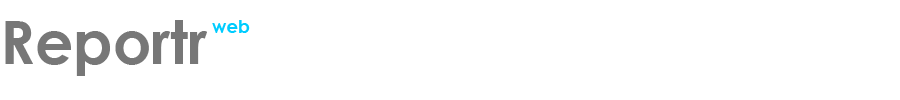
<style>
.page{position:relative;width:900px;height:100px;background:#ffffff}
.page>*{position:absolute;margin:0}
.t1{font:60px "CenturyGothic-Bold";color:#777777}
.t2{font:18px "CenturyGothic-Bold";color:#00ccff}
</style>
<div class="page">
<p class="t1" style="left:5px;top:20px;width:202px;height:56px">Reportr</p>
<p class="t2" style="left:212px;top:20px;width:38px;height:13px">web</p>
</div>
